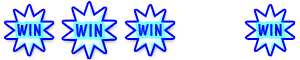
<style>
.page{position:relative;width:300px;height:60px;background:#ffffff}
.page>*{position:absolute;margin:0}
.t1{font:17px "DomCasualBT-Regular";letter-spacing:0.03em;color:#0000ff}
.t2{font:19px "DomCasualBT-Regular";letter-spacing:0.03em;color:#0811ff}
.t3{font:17px "DomCasualBT-Regular";letter-spacing:0.03em;color:#0811ff}
</style>
<div class="page">
<p class="t1" style="left:17px;top:24px;width:24px;height:12px">WIN</p>
<p class="t2" style="left:76px;top:24px;width:27px;height:13px">WIN</p>
<p class="t3" style="left:138px;top:24px;width:24px;height:12px">WIN</p>
<p class="t1" style="left:258px;top:24px;width:24px;height:12px">WIN</p>
</div>
